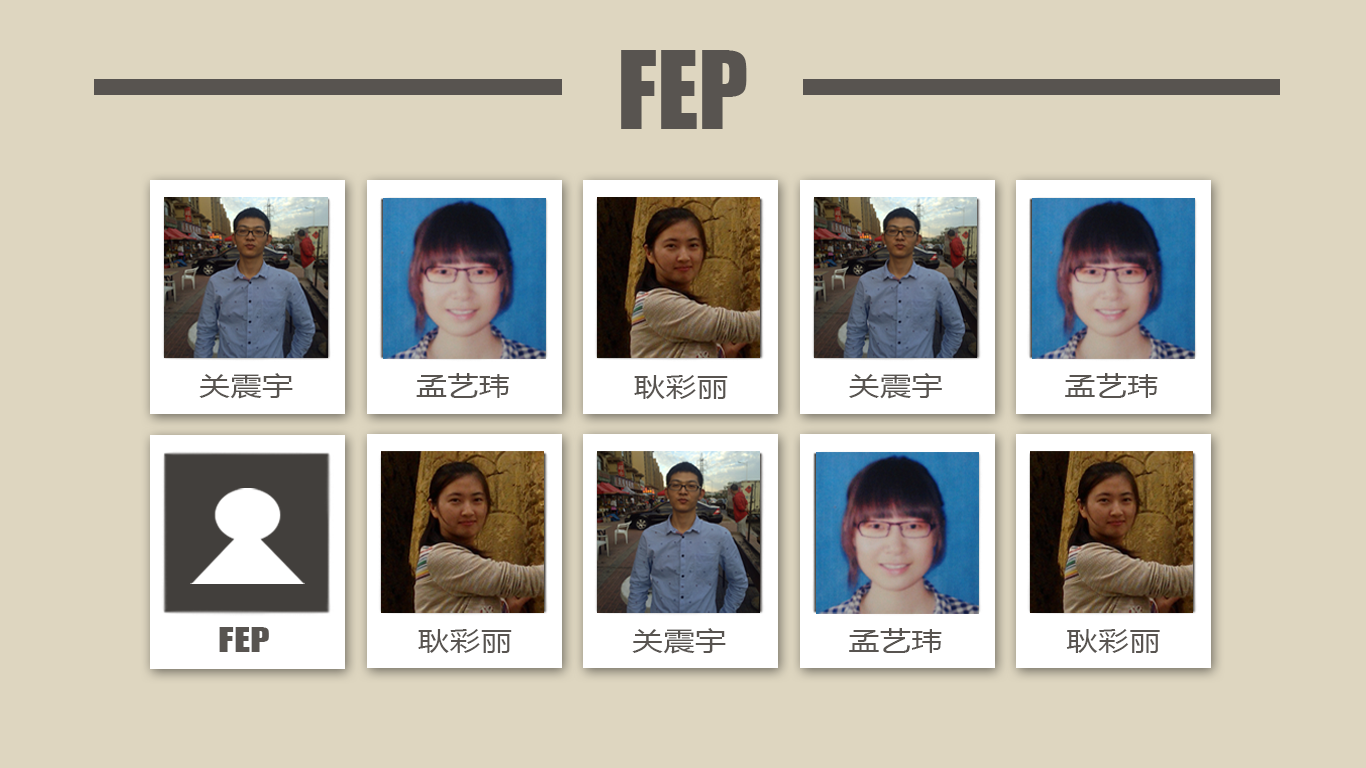
<style>
.page{position:relative;width:1366px;height:768px;background:#ded6c0}
.page>*{position:absolute;margin:0}
.t1{font:100px "Impact";color:#585450}
.t2{font:25.8px "MicrosoftYaHei";color:#585450;scale:1.22 1}
.t3{font:31.6px "Impact";color:#585450;scale:1.23 1}
</style>
<div class="page">
<p class="t1" style="left:621px;top:50px;width:126px;height:79px">FEP</p>
<p class="t2" style="left:199px;top:373px;width:94px;height:26px">关震宇</p>
<p class="t2" style="left:416px;top:373px;width:93px;height:25px">孟艺玮</p>
<p class="t2" style="left:634px;top:375px;width:94px;height:24px">耿彩丽</p>
<p class="t2" style="left:849px;top:373px;width:93px;height:26px">关震宇</p>
<p class="t2" style="left:1065px;top:373px;width:93px;height:25px">孟艺玮</p>
<p class="t3" style="left:219px;top:627px;width:50px;height:25px">FEP</p>
<p class="t2" style="left:418px;top:629px;width:94px;height:24px">耿彩丽</p>
<p class="t2" style="left:632px;top:628px;width:94px;height:26px">关震宇</p>
<p class="t2" style="left:849px;top:628px;width:93px;height:25px">孟艺玮</p>
<p class="t2" style="left:1066px;top:629px;width:94px;height:24px">耿彩丽</p>
</div>
